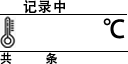
<style>
.page{position:relative;width:128px;height:64px;background:#ffffff}
.page>*{position:absolute;margin:0}
.t1{font:14px "AdobeHeitiStd-Regular";letter-spacing:0.05em;color:#000000}
.t2{font:24px "AdobeHeitiStd-Regular";letter-spacing:0.05em;color:#000000}
.t3{font:12px "AdobeHeitiStd-Regular";letter-spacing:0.05em;color:#000000}
</style>
<div class="page">
<p class="t1" style="left:23px;top:0px;width:42px;height:14px">记录中</p>
<p class="t2" style="left:103px;top:18px;width:22px;height:21px">℃</p>
<p class="t3" style="left:0px;top:52px;width:57px;height:13px">共          条</p>
</div>
